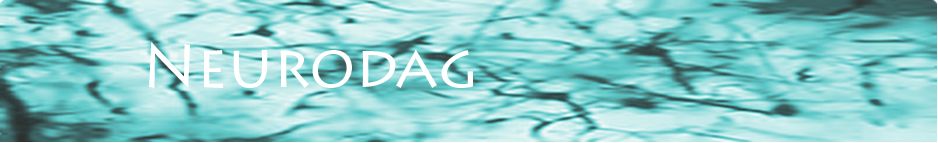
<style>
.page{position:relative;width:938px;height:143px}
.page>*{position:absolute;margin:0}
.t1{font:60px "LithosPro-Regular";color:#ffffff}
</style>
<div class="page">
<p class="t1" style="left:149px;top:42px;width:324px;height:46px">Neurodag</p>
</div>
